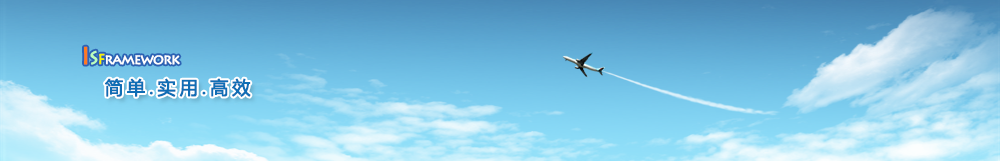
<style>
.page{position:relative;width:1000px;height:161px}
.page>*{position:absolute;margin:0}
.t1{font:14px "LithosPro-Regular";letter-spacing:-0.08em;color:#ffffff;font-weight:bold}
.t2{font:24px "LithosPro-Regular";letter-spacing:-0.08em;color:#ff7a21;font-weight:bold}
.t3{font:18px "LithosPro-Regular";letter-spacing:-0.08em;color:#bbfebd;font-weight:bold}
.t4{font:14px "LithosPro-Regular";letter-spacing:-0.08em;color:#f8f500;font-weight:bold}
.t5{font:18px "MicrosoftYaHei";letter-spacing:0.2em;color:#106eb5;font-weight:bold}
</style>
<div class="page">
<p class="t1" style="left:84px;top:46px;width:96px;height:19px"><span class="t2">I</span><span class="t3">S</span><span class="t4">F</span>ramework</p>
<p class="t5" style="left:105px;top:78px;width:146px;height:19px">简单.实用.高效</p>
</div>
